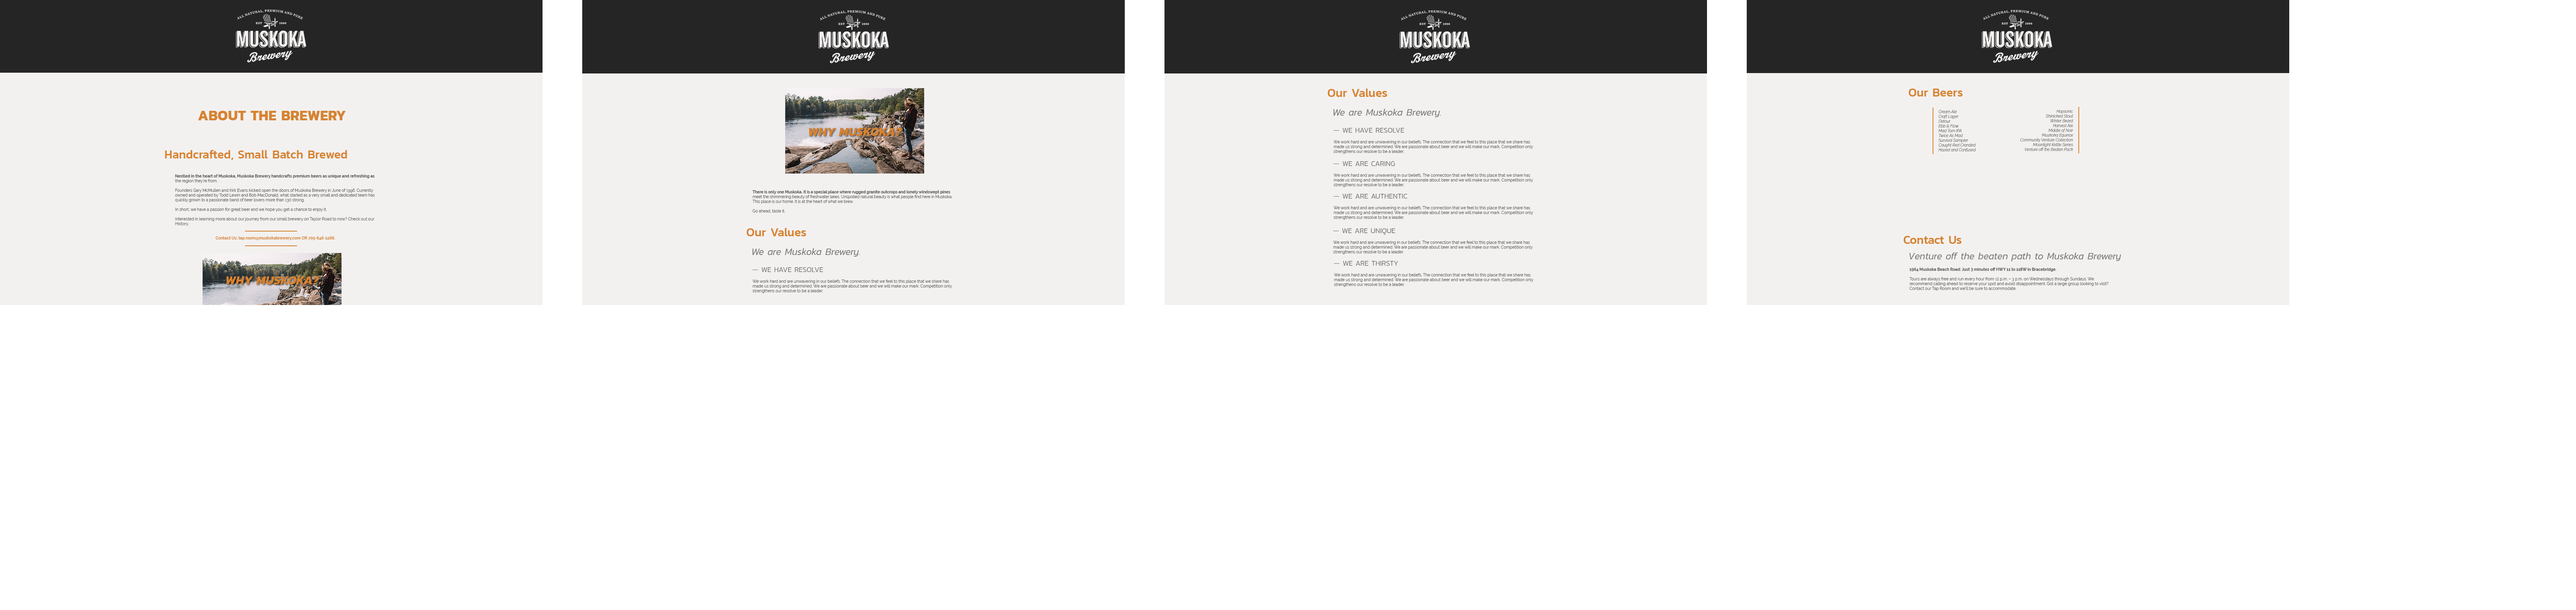
<style>
.page{position:relative;width:2576px;height:610px;background:#ffffff}
.page>*{position:absolute;margin:0}
.t1{font:11.9px "Kanit-Medium";color:#d78330}
.t2{font:14.3px "Kanit-Bold";color:#d78330}
.t3{font:9.5px "Kanit-LightItalic";color:#6f6f6e}
.t4{font:4px "Raleway-LightItalic";color:#525252}
.t5{font:11.9px "Kanit-BoldItalic";color:#d78330}
.t6{font:7.1px "Kanit-Light";color:#6f6f6e}
.t7{font:4px "Raleway-Regular";color:#525252}
.t8{font:4px "Raleway-Bold";color:#525252}
.t9{font:4px "Raleway-Bold";color:#d78330}
.t10{font:4.8px "MyriadPro-Regular";color:#6f6f6e}
</style>
<div class="page">
<p class="t1" style="left:1328px;top:89px;width:59px;height:8px">Our Values</p>
<p class="t1" style="left:1909px;top:89px;width:54px;height:8px">Our Beers</p>
<p class="t2" style="left:198px;top:111px;width:148px;height:9px">ABOUT THE BREWERY</p>
<p class="t3" style="left:1333px;top:109px;width:108px;height:8px">We are Muskoka Brewery.</p>
<p class="t4" style="left:1938px;top:110px;width:38px;height:42px">Cream Ale<br>Craft Lager<br>Detour<br>Ebb &amp; Flow<br>Mad Tom IPA<br>Twice As Mad<br>Survival Sampler<br>Caught Red Cranded<br>Hazed and Confused</p>
<p class="t4" style="left:2020px;top:110px;width:53px;height:41px;text-align:right">Hopsonic<br>Shinicked Stout<br>Winter Beard<br>Harvest Ale<br>Middle of Noir<br>Muskoka Equinox<br>Community Venture Collection<br>Moonlight Kettle Series<br>Venture off the Beaten Pack</p>
<p class="t5" style="left:809px;top:128px;width:93px;height:8px">WHY MUSKOKA?</p>
<p class="t6" style="left:1333px;top:128px;width:71px;height:5px">— WE HAVE RESOLVE</p>
<p class="t1" style="left:165px;top:150px;width:182px;height:10px">Handcrafted, Small Batch Brewed</p>
<p class="t7" style="left:1333px;top:140px;width:200px;height:14px">We work hard and are unwavering in our beliefs. The connection that we feel to this place that we share has made us strong and determined. We are passionate about beer and we will make our mark. Competition only strengthens our resolve to be a leader.</p>
<p class="t6" style="left:1333px;top:161px;width:62px;height:5px">— WE ARE CARING</p>
<p class="t7" style="left:1333px;top:174px;width:200px;height:13px">We work hard and are unwavering in our beliefs. The connection that we feel to this place that we share has made us strong and determined. We are passionate about beer and we will make our mark. Competition only strengthens our resolve to be a leader.</p>
<p class="t7" style="left:175px;top:174px;width:200px;height:66px"><span class="t8">Nestled in the heart of Muskoka, Muskoka Brewery handcrafts premium beers as unique and refreshing as </span>the region they’re from.<br><br>Founders Gary McMullen and Kirk Evans kicked open the doors of Muskoka Brewery in June of 1996. Currently owned and operated by Todd Lewin and Bob MacDonald, what started as a very small and dedicated team has quickly grown to a passionate band of beer lovers more than 130 strong.<br><br>In short, we have a passion for great beer and we hope you get a chance to enjoy it.<br><br>Interested in learning more about our journey from our small brewery on Taylor Road to now? Check out our History.<br><br><br><span class="t9">Contact Us: tap.room@muskokabrewery.com OR 705-646-1266.</span></p>
<p class="t7" style="left:752px;top:190px;width:200px;height:23px"><span class="t8">There is only one Muskoka. It is a special place where rugged granite outcrops and lonely windswept pines </span>meet the shimmering beauty of freshwater lakes. Unspoiled natural beauty is what people find here in Muskoka. This place is our home. It is at the heart of what we brew.<br><br>Go ahead, taste it.</p>
<p class="t6" style="left:1333px;top:194px;width:75px;height:5px">— WE ARE AUTHENTIC</p>
<p class="t7" style="left:1333px;top:206px;width:200px;height:14px">We work hard and are unwavering in our beliefs. The connection that we feel to this place that we share has made us strong and determined. We are passionate about beer and we will make our mark. Competition only strengthens our resolve to be a leader.</p>
<p class="t1" style="left:747px;top:228px;width:59px;height:8px">Our Values</p>
<p class="t6" style="left:1333px;top:228px;width:62px;height:7px">— WE ARE UNIQUE</p>
<p class="t7" style="left:1333px;top:241px;width:200px;height:13px">We work hard and are unwavering in our beliefs. The connection that we feel to this place that we share has made us strong and determined. We are passionate about beer and we will make our mark. Competition only strengthens our resolve to be a leader.</p>
<p class="t1" style="left:1904px;top:236px;width:58px;height:8px">Contact Us</p>
<p class="t3" style="left:752px;top:248px;width:108px;height:9px">We are Muskoka Brewery.</p>
<p class="t3" style="left:1909px;top:253px;width:212px;height:8px">Venture off the beaten path to Muskoka Brewery</p>
<p class="t6" style="left:752px;top:267px;width:71px;height:5px">— WE HAVE RESOLVE</p>
<p class="t10" style="left:1334px;top:261px;width:64px;height:5px">— WE ARE THIRSTY</p>
<p class="t7" style="left:1909px;top:268px;width:200px;height:23px"><span class="t8">1964 Muskoka Beach Road: Just 3 minutes off HWY 11 to 118W in Bracebridge.<br><br></span>Tours are always free and run every hour from 12 p.m. – 3 p.m. on Wednesdays through Sundays. We recommend calling ahead to reserve your spot and avoid disappointment. Got a large group looking to visit? Contact our Tap Room and we’ll be sure to accommodate.<br><br>Contact Us: tap.room@muskokabrewery.com or call 705-646-1266. Visit Our Website</p>
<p class="t5" style="left:226px;top:276px;width:93px;height:8px">WHY MUSKOKA?</p>
<p class="t7" style="left:752px;top:280px;width:200px;height:13px">We work hard and are unwavering in our beliefs. The connection that we feel to this place that we share has made us strong and determined. We are passionate about beer and we will make our mark. Competition only strengthens our resolve to be a leader.</p>
<p class="t7" style="left:1334px;top:273px;width:199px;height:14px">We work hard and are unwavering in our beliefs. The connection that we feel to this place that we share has made us strong and determined. We are passionate about beer and we will make our mark. Competition only strengthens our resolve to be a leader.</p>
</div>
